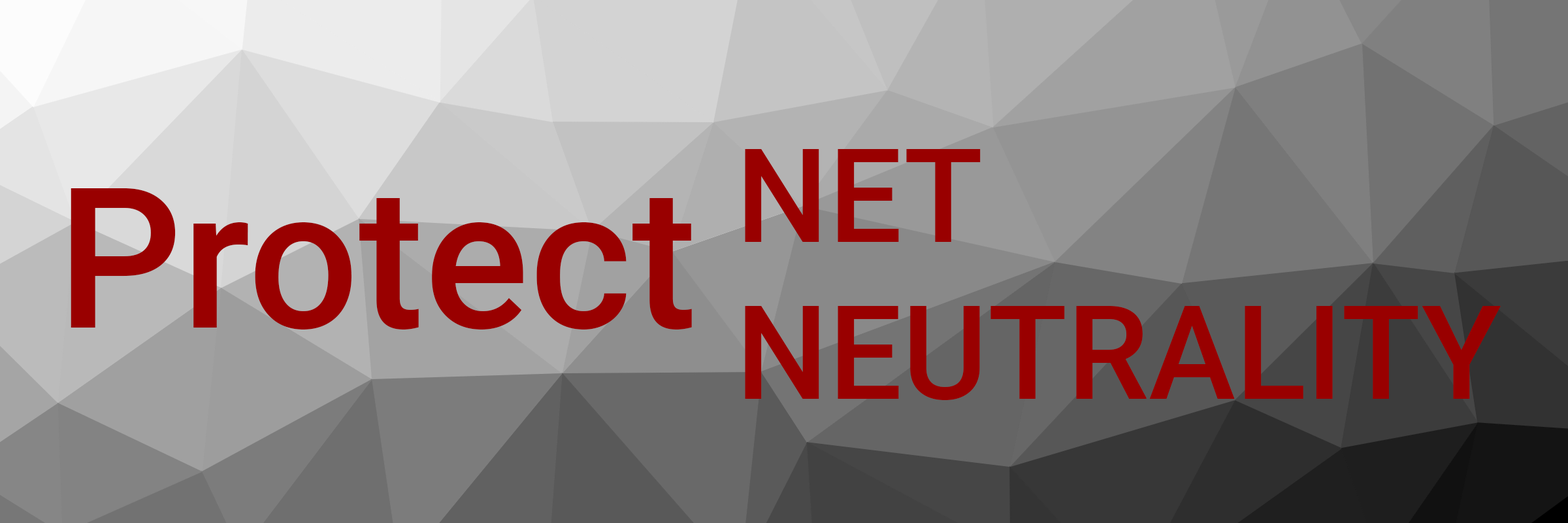
<style>
.page{position:relative;width:1568px;height:523px}
.page>*{position:absolute;margin:0}
.t1{font:130.7px "Roboto-Medium";color:#990000}
.t2{font:196px "Roboto-Medium";color:#990000}
</style>
<div class="page">
<p class="t1" style="left:745px;top:149px;width:756px;height:251px">NET<br>NEUTRALITY</p>
<p class="t2" style="left:71px;top:188px;width:621px;height:141px">Protect</p>
</div>
